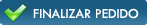
<style>
.page{position:relative;width:147px;height:25px;background:#1a5b81}
.page>*{position:absolute;margin:0}
.t1{font:14px "TwCenMT-Regular";color:#ffffff}
</style>
<div class="page">
<p class="t1" style="left:33px;top:8px;width:106px;height:11px">FINALIZAR PEDIDO</p>
</div>
